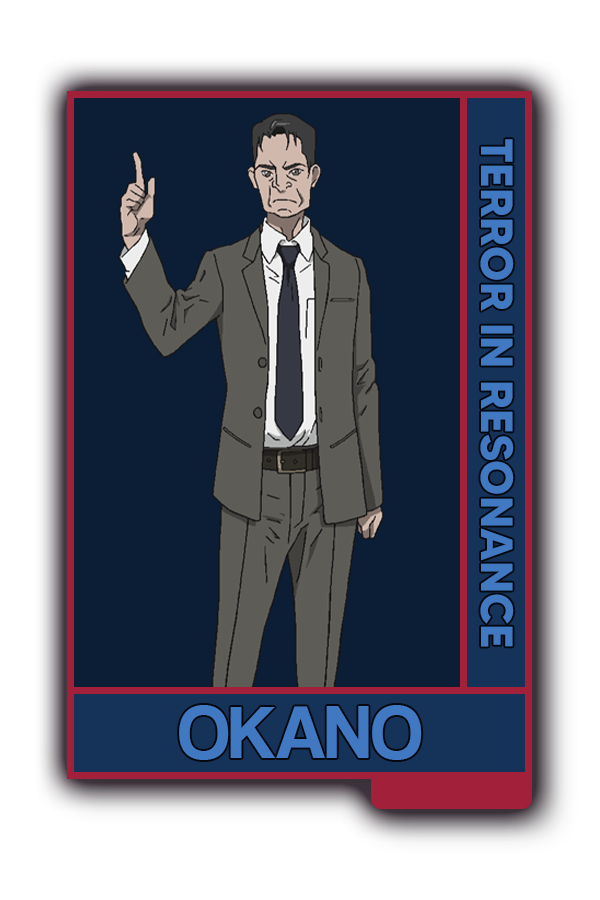
<style>
.page{position:relative;width:600px;height:900px;background:#0c1e35}
.page>*{position:absolute;margin:0}
.t1{font:45.2px "MADETOMMY-Bold";color:#4079c2}
.t2{font:77px "CoolveticaRg-Regular";color:#4079c2}
</style>
<div class="page">
<p class="t1" style="left:480px;top:139px;width:34px;height:508px;rotate:90deg">TERROR IN RESONANCE</p>
<p class="t2" style="left:179px;top:705px;width:243px;height:55px">OKANO</p>
</div>
